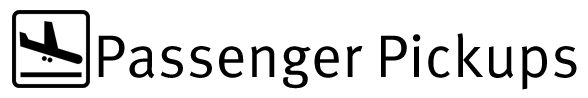
<style>
.page{position:relative;width:588px;height:98px;background:#ffffff}
.page>*{position:absolute;margin:0}
.t1{font:60px "MetaOT-Normal";color:#000000}
</style>
<div class="page">
<p class="t1" style="left:98px;top:33px;width:479px;height:57px">Passenger Pickups</p>
</div>
